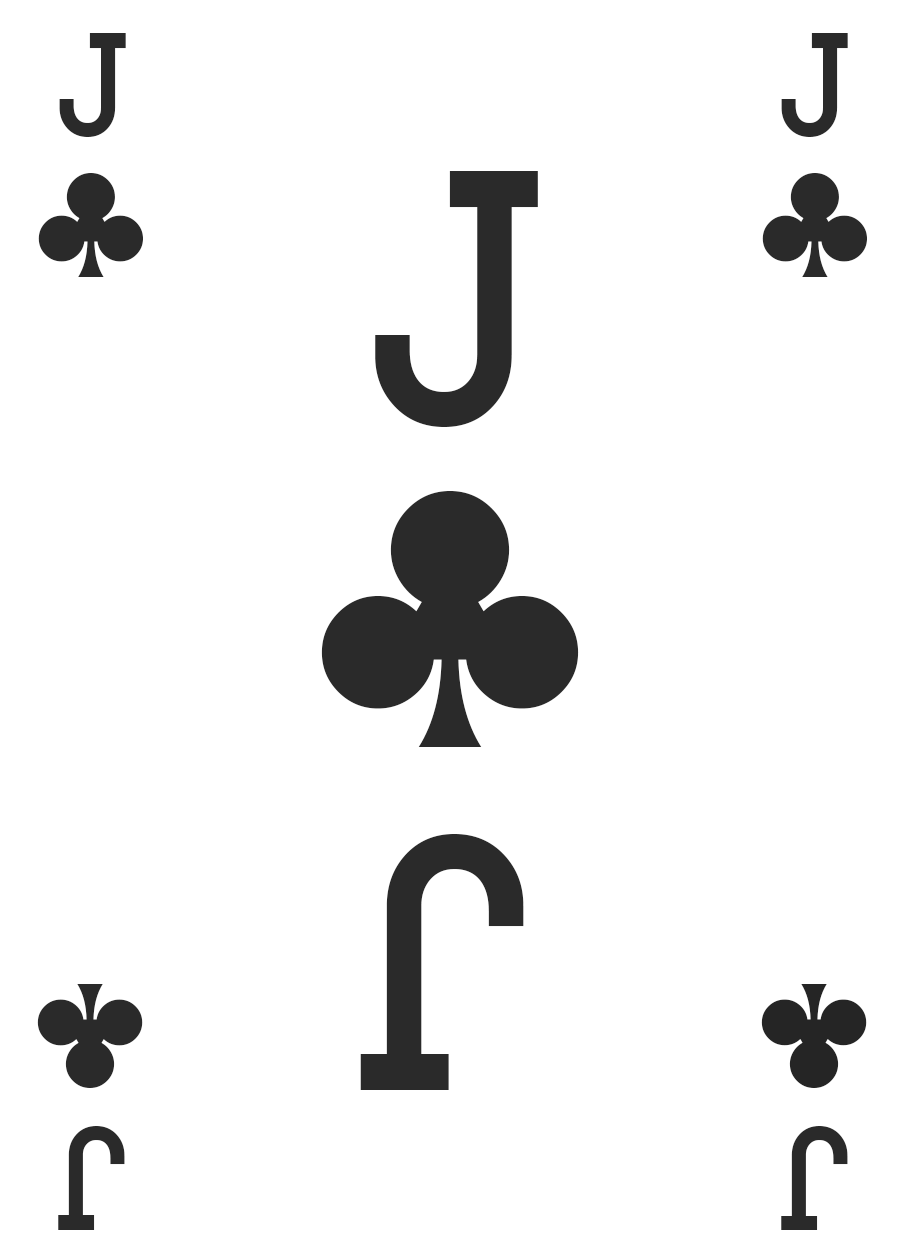
<style>
.page{position:relative;width:900px;height:1260px;background:#ffffff}
.page>*{position:absolute;margin:0}
.t1{font:122px "CardCharacters";color:#2a2a2a}
.t2{font:300px "CardCharacters";color:#2a2a2a}
.t3{font:121.8px "CardCharacters";color:#252525}
.t4{font:121.8px "CardCharacters";color:#2a2a2a}
</style>
<div class="page">
<p class="t1" style="left:59px;top:33px;width:67px;height:104px">j</p>
<p class="t1" style="left:781px;top:33px;width:67px;height:104px">j</p>
<p class="t1" style="left:38px;top:173px;width:105px;height:104px">]</p>
<p class="t2" style="left:375px;top:171px;width:163px;height:256px">j</p>
<p class="t1" style="left:762px;top:173px;width:105px;height:104px">]</p>
<p class="t2" style="left:321px;top:491px;width:258px;height:256px">]</p>
<p class="t2" style="left:360px;top:834px;width:164px;height:256px;rotate:180deg">j</p>
<p class="t1" style="left:37px;top:984px;width:106px;height:104px;rotate:180deg">]</p>
<p class="t3" style="left:761px;top:984px;width:106px;height:104px;rotate:180deg">]</p>
<p class="t1" style="left:58px;top:1126px;width:67px;height:104px;rotate:180deg">j</p>
<p class="t4" style="left:781px;top:1126px;width:67px;height:104px;rotate:180deg">j</p>
</div>
